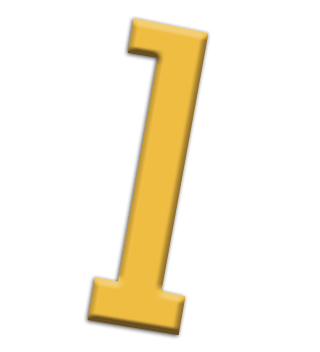
<style>
.page{position:relative;width:320px;height:352px;background:#ffffff}
.page>*{position:absolute;margin:0}
.t1{font:422px "FinkHeavy";color:#efbd42}
</style>
<div class="page">
<p class="t1" style="left:87px;top:18px;width:122px;height:318px;rotate:11deg">l</p>
</div>
